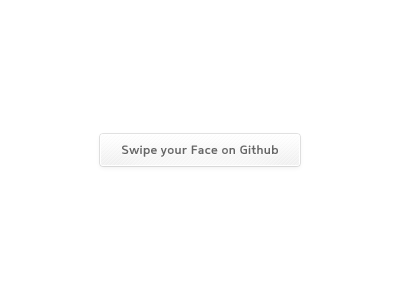
<style>
.page{position:relative;width:400px;height:300px;background:#ffffff}
.page>*{position:absolute;margin:0}
.t1{font:12px "Mentone-SemiBold";letter-spacing:0.025em;color:#656565}
</style>
<div class="page">
<p class="t1" style="left:122px;top:145px;width:156px;height:12px">Swipe your Face on Github</p>
</div>
